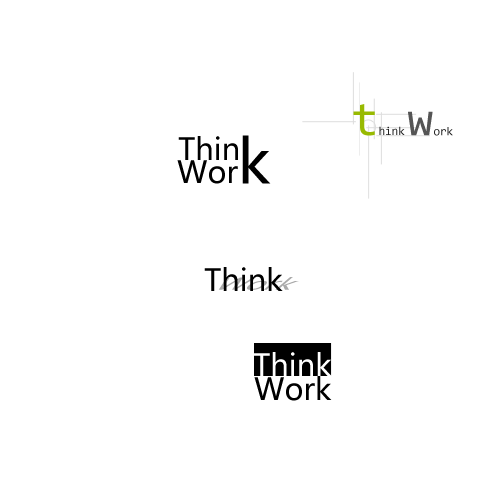
<style>
.page{position:relative;width:500px;height:500px;background:#ffffff}
.page>*{position:absolute;margin:0}
.t1{font:12px "Consolas";color:#222222}
.t2{font:48px "Consolas";color:#98ba01}
.t3{font:48px "Consolas";color:#555555}
.t4{font:30px "MicrosoftYaHei";color:#000000}
.t5{font:60px "MicrosoftYaHei";color:#000000}
.t6{font:30px "MicrosoftYaHei";color:#ffffff}
</style>
<div class="page">
<p class="t1" style="left:353px;top:104px;width:52px;height:32px"><span class="t2">t</span>hink</p>
<p class="t1" style="left:408px;top:111px;width:45px;height:25px"><span class="t3">w</span>ork</p>
<p class="t4" style="left:178px;top:136px;width:60px;height:24px">Thin</p>
<p class="t5" style="left:242px;top:135px;width:29px;height:49px">k</p>
<p class="t4" style="left:177px;top:160px;width:61px;height:24px">Wor</p>
<p class="t4" style="left:204px;top:267px;width:79px;height:24px">Think</p>
<p class="t6" style="left:253px;top:352px;width:79px;height:24px">Think</p>
<p class="t4" style="left:254px;top:376px;width:78px;height:25px">Work</p>
</div>
